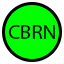
<style>
.page{position:relative;width:64px;height:64px;background:#00ff00}
.page>*{position:absolute;margin:0}
.t1{font:20.8px "MyriadPro-Regular";color:#000000}
</style>
<div class="page">
<p class="t1" style="left:8px;top:25px;width:47px;height:14px">CBRN</p>
</div>
